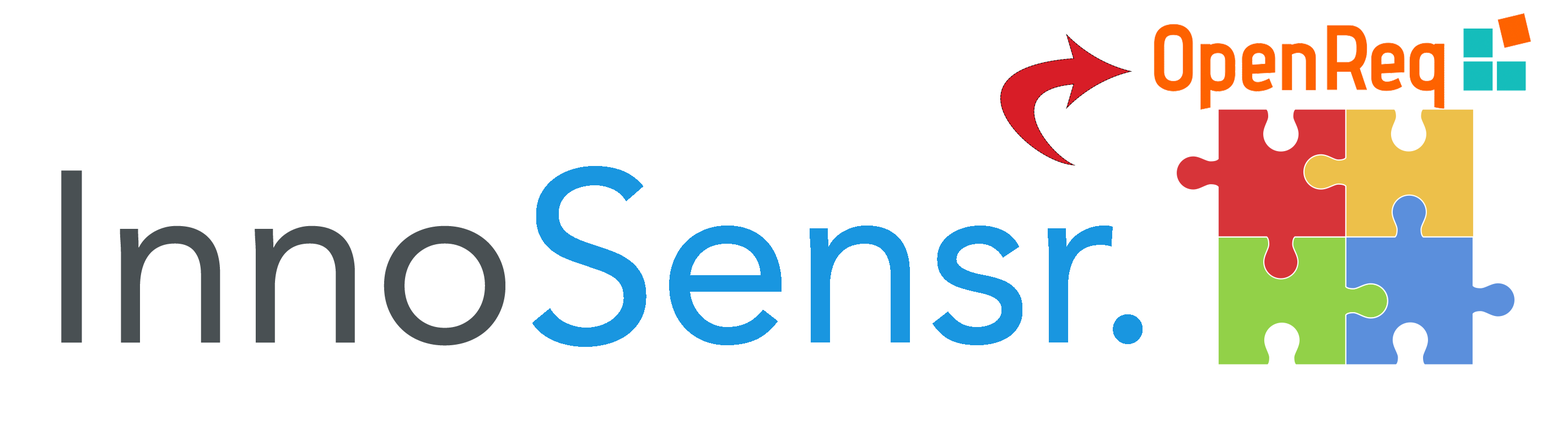
<style>
.page{position:relative;width:1568px;height:434px;background:#ffffff}
.page>*{position:absolute;margin:0}
.t1{font:242.5px "Avenir-Roman";color:#495053}
.t2{font:242.5px "Avenir-Roman";color:#1996e0}
</style>
<div class="page">
<p class="t1" style="left:61px;top:170px;width:444px;height:176px">Inno</p>
<p class="t2" style="left:532px;top:166px;width:611px;height:181px">Sensr.</p>
</div>
